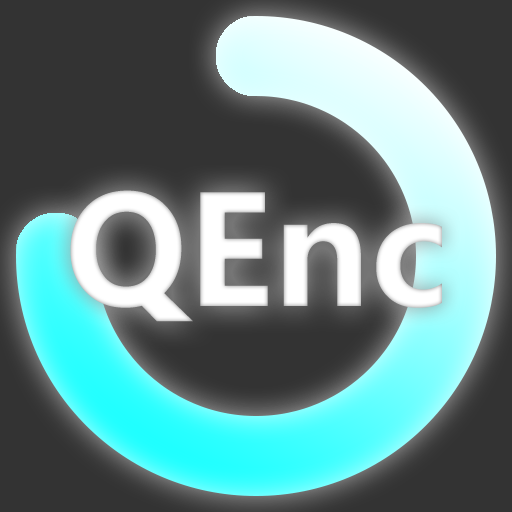
<style>
.page{position:relative;width:512px;height:512px;background:#333333}
.page>*{position:absolute;margin:0}
.t1{font:150px "MicrosoftYaHei-Bold";color:#ffffff}
</style>
<div class="page">
<p class="t1" style="left:70px;top:190px;width:372px;height:132px">QEnc</p>
</div>
